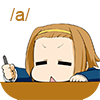
<style>
.page{position:relative;width:100px;height:100px;background:#ffffff}
.page>*{position:absolute;margin:0}
.t1{font:18px "ArialMT";color:#b77718}
</style>
<div class="page">
<p class="t1" style="left:10px;top:8px;width:20px;height:13px">/a/</p>
</div>
